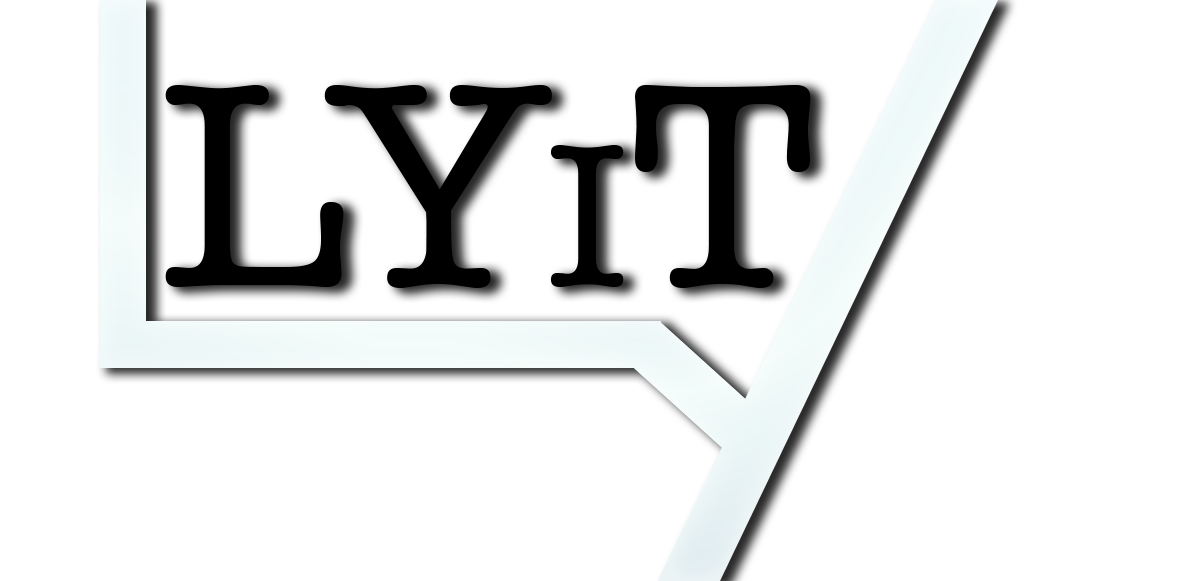
<style>
.page{position:relative;width:1187px;height:581px;background:#ffffff}
.page>*{position:absolute;margin:0}
.t1{font:300px "AmericanTypewriter";color:#000000;font-variant:small-caps}
</style>
<div class="page">
<p class="t1" style="left:165px;top:85px;width:646px;height:203px">LYiT</p>
</div>
